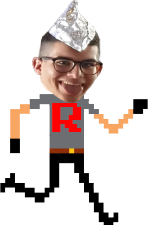
<style>
.page{position:relative;width:150px;height:225px;background:#ffffff}
.page>*{position:absolute;margin:0}
.t1{font:58.3px "ArcadeClassic";color:#ff0000}
</style>
<div class="page">
<p class="t1" style="left:52px;top:103px;width:30px;height:29px">R</p>
</div>
